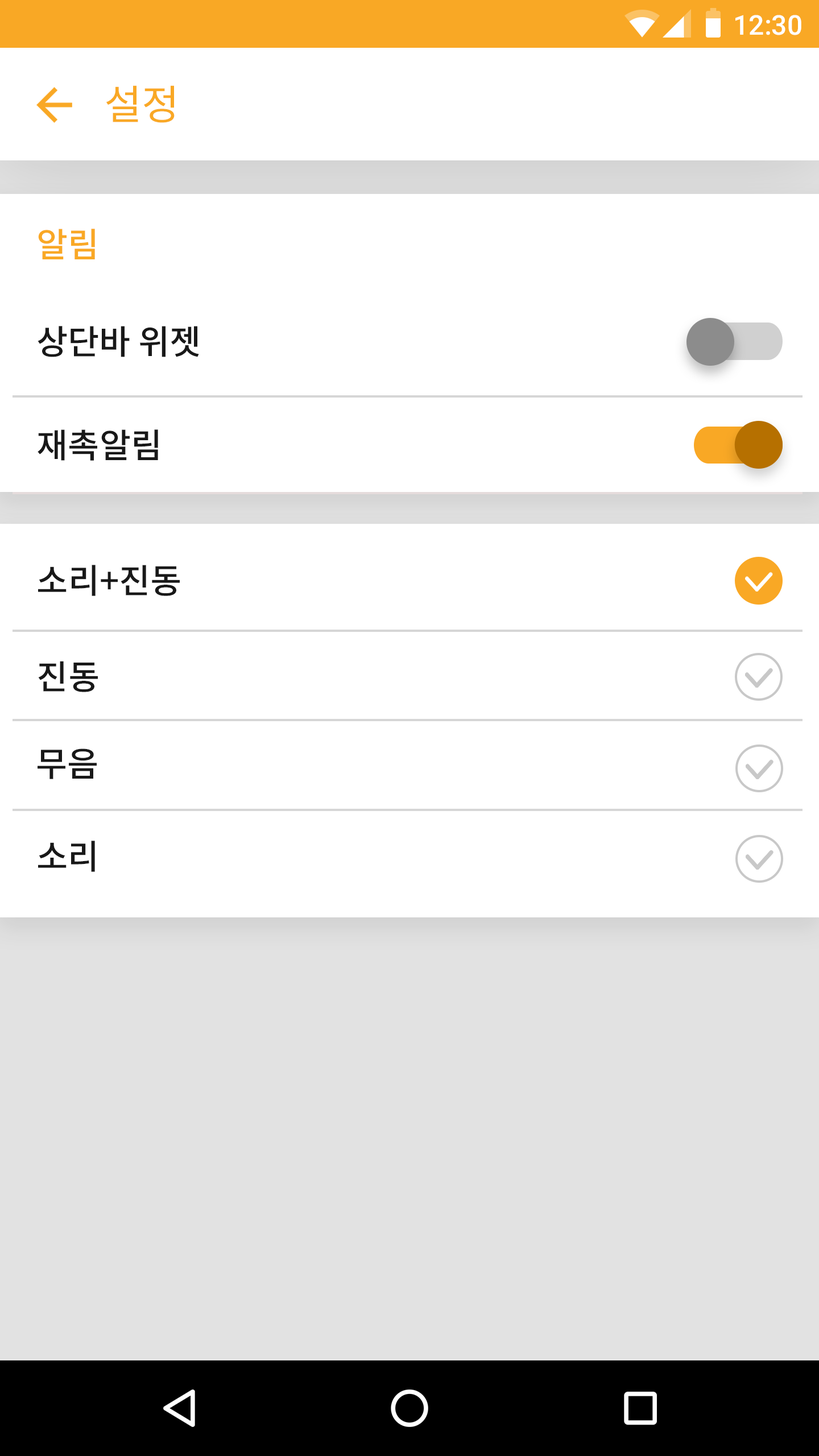
<style>
.page{position:relative;width:819px;height:1456px;background:#ffffff}
.page>*{position:absolute;margin:0}
.t1{font:27.3px "Roboto-Medium";color:#ffffff}
.t2{font:40.9px "NotoSansCJKkr-Regular";color:#f9a825}
.t3{font:34.1px "NotoSansCJKkr-Medium";color:#f9a825}
.t4{font:34.1px "NotoSansCJKkr-Medium";color:#181818}
.t5{font:34px "NotoSansCJKkr-Medium";color:#181818}
</style>
<div class="page">
<p class="t1" style="left:735px;top:15px;width:66px;height:20px">12:30</p>
<p class="t2" style="left:106px;top:85px;width:69px;height:38px">설정</p>
<p class="t3" style="left:38px;top:229px;width:57px;height:30px">알림</p>
<p class="t4" style="left:38px;top:326px;width:161px;height:31px">상단바 위젯</p>
<p class="t4" style="left:38px;top:429px;width:120px;height:32px">재촉알림</p>
<p class="t4" style="left:38px;top:565px;width:142px;height:31px">소리+진동</p>
<p class="t5" style="left:38px;top:661px;width:60px;height:31px">진동</p>
<p class="t4" style="left:38px;top:748px;width:59px;height:31px">무음</p>
<p class="t4" style="left:38px;top:841px;width:57px;height:31px">소리</p>
</div>
